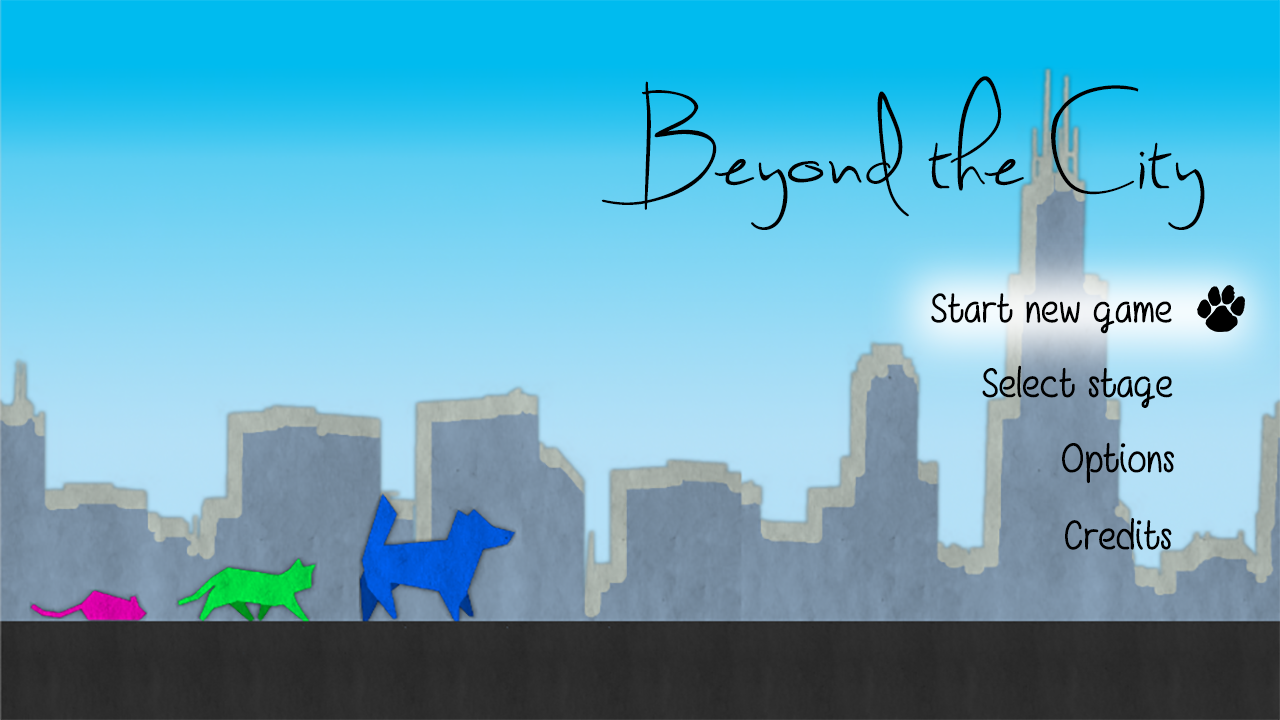
<style>
.page{position:relative;width:1280px;height:720px}
.page>*{position:absolute;margin:0}
.t1{font:130px "SweetlyBroken";color:#000000}
.t2{font:42px "GirlsHaveManySecrets";color:#000000}
</style>
<div class="page">
<p class="t1" style="left:601px;top:76px;width:604px;height:154px">Beyond the City</p>
<p class="t2" style="left:931px;top:293px;width:241px;height:41px">Start new game</p>
<p class="t2" style="left:982px;top:365px;width:191px;height:43px">Select stage</p>
<p class="t2" style="left:1062px;top:442px;width:112px;height:42px">Options</p>
<p class="t2" style="left:1065px;top:518px;width:107px;height:32px">Credits</p>
</div>
